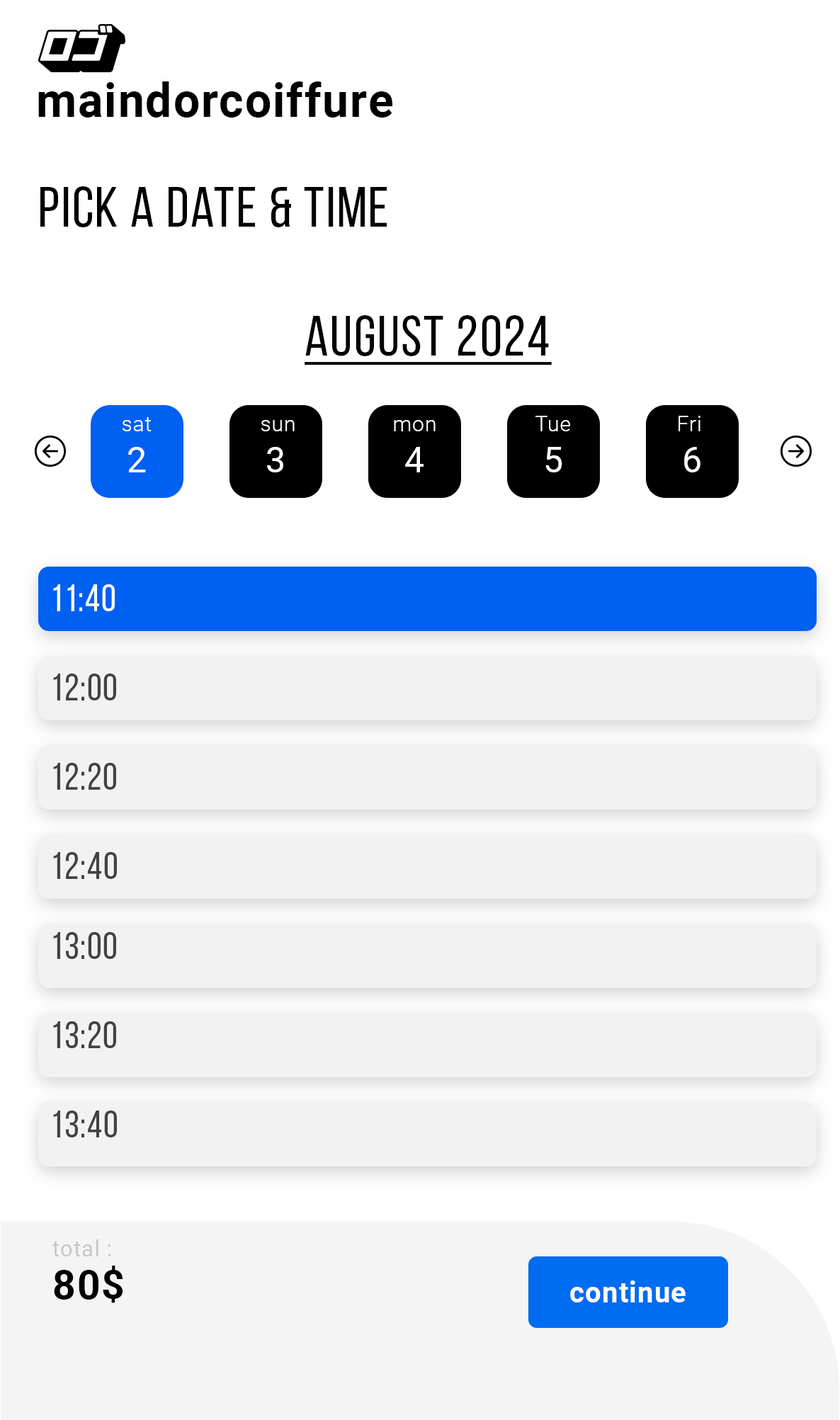
<style>
.page{position:relative;width:840px;height:1420px;background:#ffffff}
.page>*{position:absolute;margin:0}
.t1{font:46.7px "Roboto-Bold";letter-spacing:0.03em;color:#000000}
.t2{font:56.7px "BebasNeueRegular";letter-spacing:0.03em;color:#000000}
.t3{font:56.7px "BebasNeueRegular";letter-spacing:0.03em;color:#000000;text-decoration:underline}
.t4{font:21.2px "Roboto-Light";letter-spacing:0.03em;color:#ffffff}
.t5{font:35.4px "Roboto-Regular";letter-spacing:0.03em;color:#ffffff}
.t6{font:37.7px "BebasNeueRegular";letter-spacing:0.03em;color:#ffffff}
.t7{font:37.7px "BebasNeueRegular";letter-spacing:0.03em;color:#424242}
.t8{font:22.3px "Roboto-Regular";letter-spacing:0.03em;color:#c5c5c5}
.t9{font:40.3px "Roboto-Bold";letter-spacing:0.03em;color:#000000}
.t10{font:28.3px "Roboto-Bold";letter-spacing:0.03em;color:#ffffff}
</style>
<div class="page">
<p class="t1" style="left:38px;top:81px;width:354px;height:37px">maindorcoiffure</p>
<p class="t2" style="left:40px;top:186px;width:347px;height:41px">Pick a date &amp; Time</p>
<p class="t3" style="left:304px;top:315px;width:248px;height:50px">August 2024</p>
<p class="t4" style="left:123px;top:417px;width:29px;height:14px">sat</p>
<p class="t4" style="left:261px;top:420px;width:34px;height:11px">sun</p>
<p class="t4" style="left:394px;top:420px;width:42px;height:11px">mon</p>
<p class="t4" style="left:535px;top:416px;width:35px;height:15px">Tue</p>
<p class="t4" style="left:678px;top:416px;width:22px;height:15px">Fri</p>
<p class="t5" style="left:128px;top:447px;width:18px;height:25px">2</p>
<p class="t5" style="left:267px;top:447px;width:16px;height:25px">3</p>
<p class="t5" style="left:405px;top:447px;width:18px;height:25px">4</p>
<p class="t5" style="left:545px;top:447px;width:17px;height:25px">5</p>
<p class="t5" style="left:684px;top:447px;width:16px;height:25px">6</p>
<p class="t6" style="left:53px;top:584px;width:62px;height:27px">11:40</p>
<p class="t7" style="left:53px;top:673px;width:63px;height:27px">12:00</p>
<p class="t7" style="left:53px;top:763px;width:63px;height:27px">12:20</p>
<p class="t7" style="left:53px;top:852px;width:64px;height:27px">12:40</p>
<p class="t7" style="left:53px;top:932px;width:63px;height:27px">13:00</p>
<p class="t7" style="left:53px;top:1021px;width:63px;height:27px">13:20</p>
<p class="t7" style="left:53px;top:1110px;width:64px;height:27px">13:40</p>
<p class="t8" style="left:52px;top:1239px;width:59px;height:17px">total :</p>
<p class="t9" style="left:54px;top:1265px;width:69px;height:38px">80$</p>
<p class="t10" style="left:570px;top:1280px;width:115px;height:22px">continue</p>
</div>
